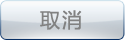
<style>
.page{position:relative;width:125px;height:40px}
.page>*{position:absolute;margin:0}
.t1{font:20.1px "MicrosoftYaHei";letter-spacing:0.1em;color:#818181}
</style>
<div class="page">
<p class="t1" style="left:40px;top:10px;width:42px;height:20px">取消</p>
</div>
